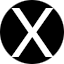
<style>
.page{position:relative;width:64px;height:64px;background:#000000}
.page>*{position:absolute;margin:0}
.t1{font:68px "Verdana";color:#ffffff}
</style>
<div class="page">
<p class="t1" style="left:11px;top:8px;width:43px;height:49px">X</p>
</div>
